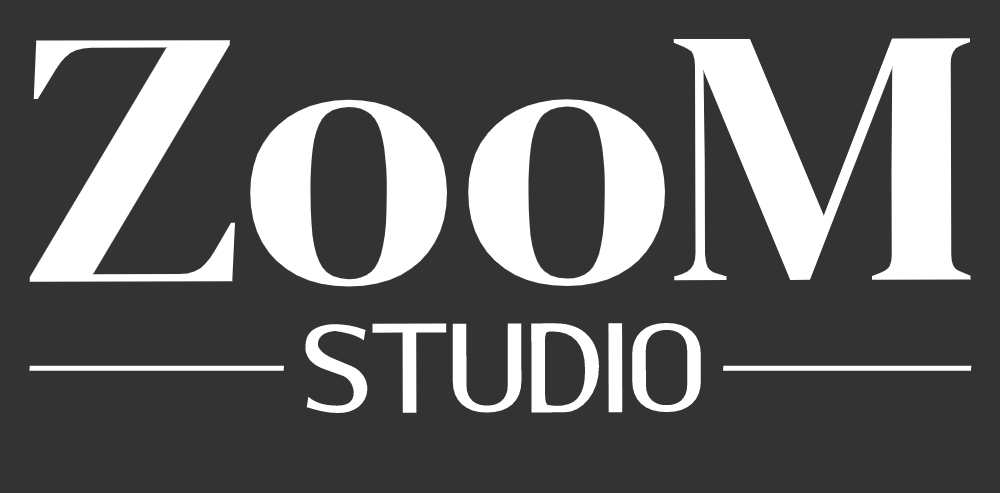
<style>
.page{position:relative;width:1000px;height:493px;background:#333333}
.page>*{position:absolute;margin:0}
.t1{font:365.3px "DMSerifDisplay-Regular";color:#ffffff;scale:1.08 1}
.t2{font:118.7px "AmerikaSans";color:#ffffff}
</style>
<div class="page">
<p class="t1" style="left:29px;top:38px;width:942px;height:249px">ZooM</p>
<p class="t2" style="left:305px;top:323px;width:396px;height:90px">STUDIO</p>
</div>
